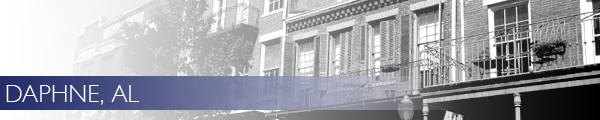
<style>
.page{position:relative;width:600px;height:120px}
.page>*{position:absolute;margin:0}
.t1{font:24px "GillSans-Light";letter-spacing:0.01em;color:#ffffff}
</style>
<div class="page">
<p class="t1" style="left:6px;top:85px;width:133px;height:20px">DAPHNE, AL</p>
</div>
